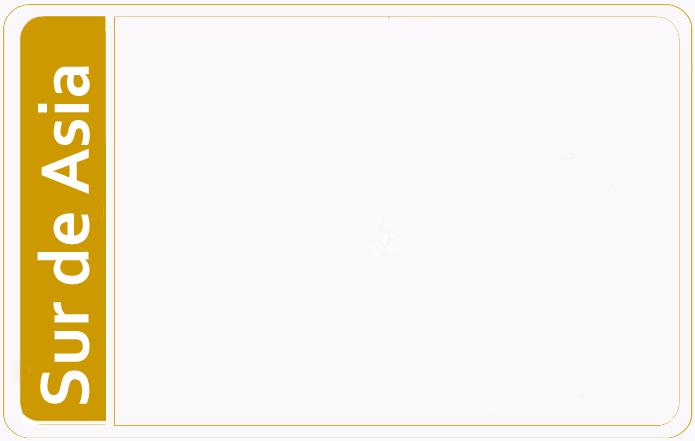
<style>
.page{position:relative;width:695px;height:441px;background:#fbf8fb}
.page>*{position:absolute;margin:0}
.t1{font:72px "Corbel-Bold";color:#ffffff}
</style>
<div class="page">
<p class="t1" style="left:37px;top:66px;width:53px;height:338px;rotate:-90deg">Sur de Asia</p>
</div>
